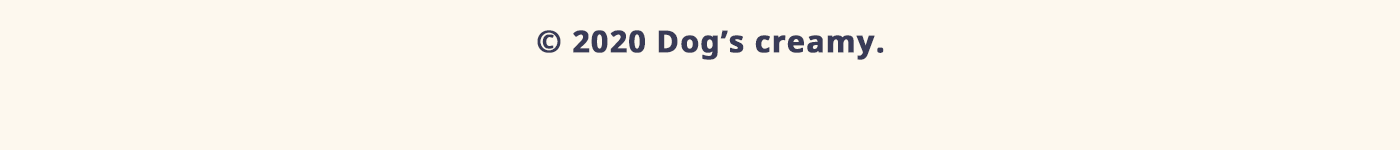
<style>
.page{position:relative;width:1400px;height:150px;background:#fdf8ee}
.page>*{position:absolute;margin:0}
.t1{font:30px "NotoSans-Bold";letter-spacing:0.025em;color:#393b57;font-weight:bold}
</style>
<div class="page">
<p class="t1" style="left:537px;top:30px;width:347px;height:30px">© 2020 Dog’s creamy.</p>
</div>
